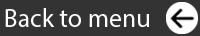
<style>
.page{position:relative;width:200px;height:36px;background:#333333}
.page>*{position:absolute;margin:0}
.t1{font:26px "MyriadPro-Regular";color:#ffffff}
</style>
<div class="page">
<p class="t1" style="left:5px;top:8px;width:144px;height:19px">Back to menu</p>
</div>
